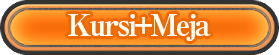
<style>
.page{position:relative;width:279px;height:55px}
.page>*{position:absolute;margin:0}
.t1{font:30px "RyuminPro-ExBold";letter-spacing:-0.08em;color:#fffff7}
</style>
<div class="page">
<p class="t1" style="left:68px;top:14px;width:143px;height:27px">Kursi+Meja</p>
</div>
